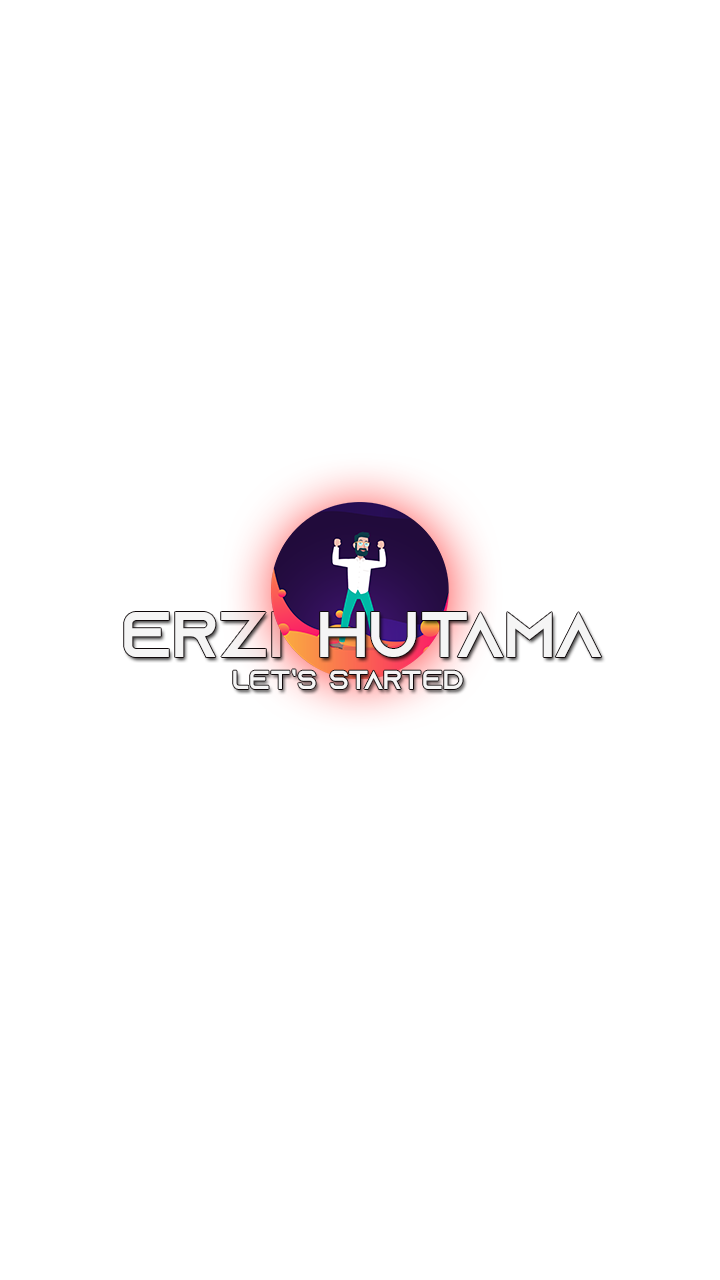
<style>
.page{position:relative;width:720px;height:1280px;background:#ffffff}
.page>*{position:absolute;margin:0}
.t1{font:30.8px "AzonixRegular";color:#f5f5f5}
.t2{font:12.5px "AzonixRegular";color:#f5f5f5}
</style>
<div class="page">
<p class="t1" style="left:124px;top:612px;width:157px;height:45px">ERZI</p>
<p class="t1" style="left:320px;top:612px;width:282px;height:45px">HUTAMA</p>
<p class="t2" style="left:233px;top:669px;width:230px;height:20px">Let’s started</p>
</div>
